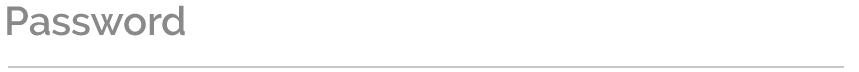
<style>
.page{position:relative;width:859px;height:72px;background:#ffffff}
.page>*{position:absolute;margin:0}
.t1{font:40px "Raleway-SemiBold";color:#8a898a}
</style>
<div class="page">
<p class="t1" style="left:7px;top:5px;width:178px;height:31px">Password</p>
</div>
